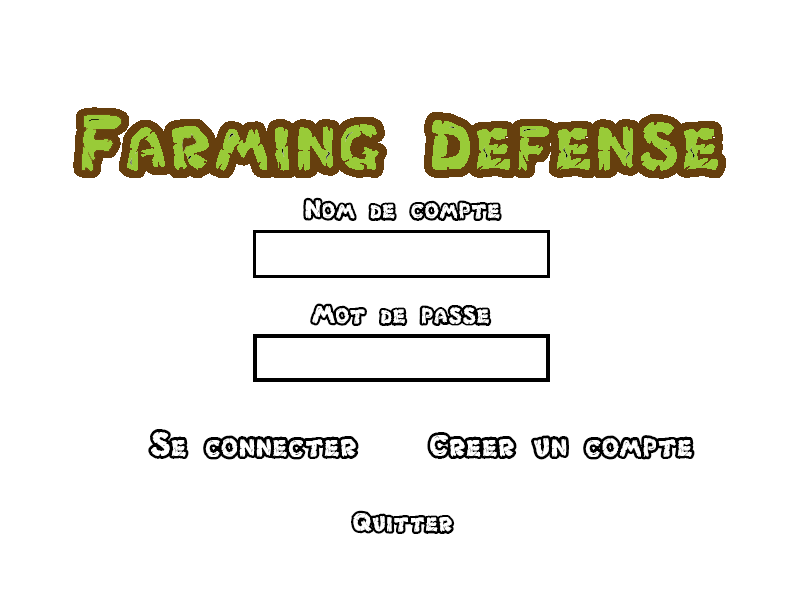
<style>
.page{position:relative;width:800px;height:600px;background:#ffffff}
.page>*{position:absolute;margin:0}
.t1{font:30px "Chlorinar";color:#000000}
.t2{font:36px "Chlorinar";color:#000000}
</style>
<div class="page">
<p class="t1" style="left:303px;top:197px;width:199px;height:24px">Nom de compte</p>
<p class="t1" style="left:310px;top:303px;width:182px;height:23px">Mot de passe</p>
<p class="t2" style="left:148px;top:429px;width:211px;height:31px">Se connecter</p>
<p class="t2" style="left:427px;top:432px;width:268px;height:28px">Creer un compte</p>
<p class="t1" style="left:351px;top:510px;width:104px;height:24px">Quitter</p>
</div>
